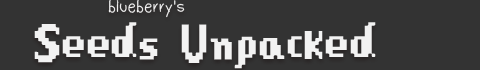
<style>
.page{position:relative;width:480px;height:70px;background:#333333}
.page>*{position:absolute;margin:0}
.t1{font:18px "Dudu_Calligraphy";color:#f2f2f2}
.t2{font:60px "Stardew-Valley";color:#f2f2f2}
</style>
<div class="page">
<p class="t1" style="left:108px;top:0px;width:77px;height:18px">blueberry's</p>
<p class="t2" style="left:34px;top:22px;width:342px;height:47px">Seeds Unpacked</p>
</div>
